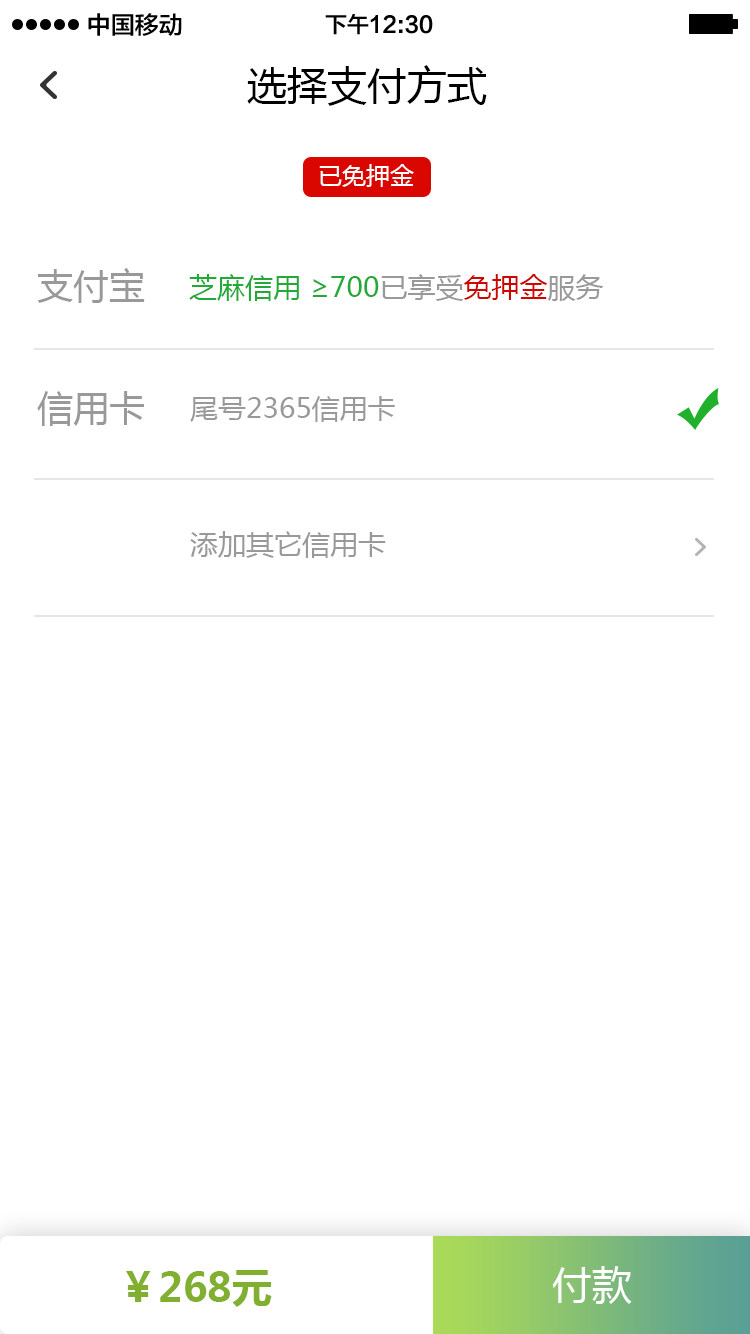
<style>
.page{position:relative;width:750px;height:1334px;background:#ffffff}
.page>*{position:absolute;margin:0}
.t1{font:24px "FZLTZHK--GBK1-0";color:#000000}
.t2{font:22px "FZLTZHK--GBK1-0";color:#000000}
.t3{font:40px "MicrosoftYaHei";color:#000000}
.t4{font:24px "MicrosoftYaHei";color:#ffffff}
.t5{font:36px "MicrosoftYaHei";color:#999999}
.t6{font:28px "MicrosoftYaHei";color:#22a938}
.t7{font:28px "MicrosoftYaHei";color:#999999}
.t8{font:28px "MicrosoftYaHei";color:#cc0700}
.t9{font:40px "MicrosoftYaHei-Bold";color:#81af2f}
.t10{font:40px "MicrosoftYaHei";color:#ffffff}
</style>
<div class="page">
<p class="t1" style="left:88px;top:13px;width:94px;height:23px">中国移动</p>
<p class="t2" style="left:325px;top:14px;width:108px;height:21px">下午12:30</p>
<p class="t3" style="left:247px;top:65px;width:240px;height:41px">选择支付方式</p>
<p class="t4" style="left:319px;top:164px;width:95px;height:23px">已免押金</p>
<p class="t5" style="left:37px;top:268px;width:108px;height:35px">支付宝</p>
<p class="t6" style="left:189px;top:274px;width:415px;height:27px">芝麻信用 ≥700<span class="t7">已享受</span><span class="t8">免押金</span><span class="t7">服务</span></p>
<p class="t5" style="left:37px;top:391px;width:107px;height:35px">信用卡</p>
<p class="t7" style="left:190px;top:396px;width:205px;height:26px">尾号2365信用卡</p>
<p class="t7" style="left:190px;top:531px;width:196px;height:27px">添加其它信用卡</p>
<p class="t9" style="left:126px;top:1270px;width:146px;height:37px">￥268元</p>
<p class="t10" style="left:552px;top:1266px;width:80px;height:38px">付款</p>
</div>
